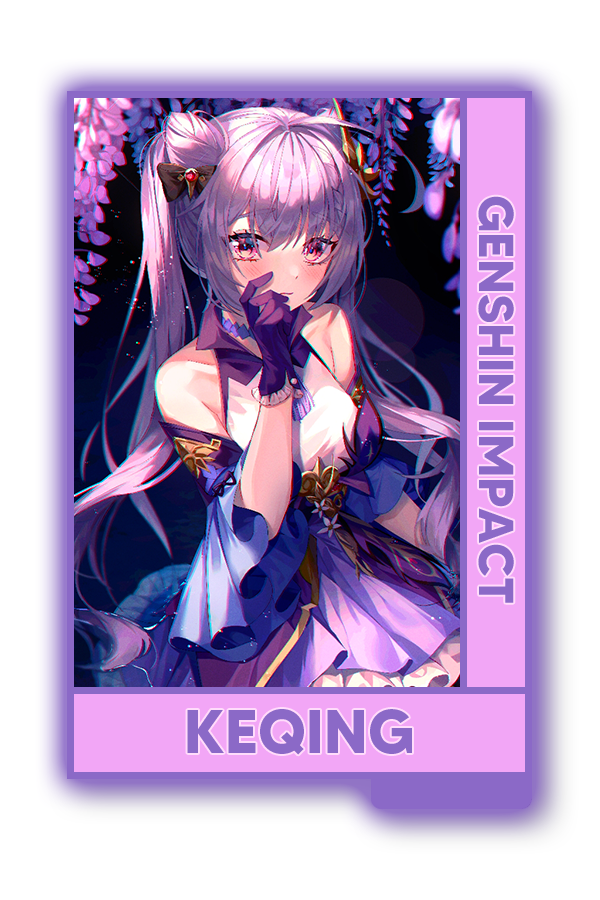
<style>
.page{position:relative;width:600px;height:900px;background:#ffffff}
.page>*{position:absolute;margin:0}
.t1{font:48.8px "MADETOMMY-Bold";color:#967cbd}
.t2{font:61.5px "MADETOMMY-Bold";color:#967cbd}
</style>
<div class="page">
<p class="t1" style="left:478px;top:196px;width:36px;height:407px;rotate:90deg">GENSHIN IMPACT</p>
<p class="t2" style="left:187px;top:709px;width:225px;height:46px">KEQING</p>
</div>
